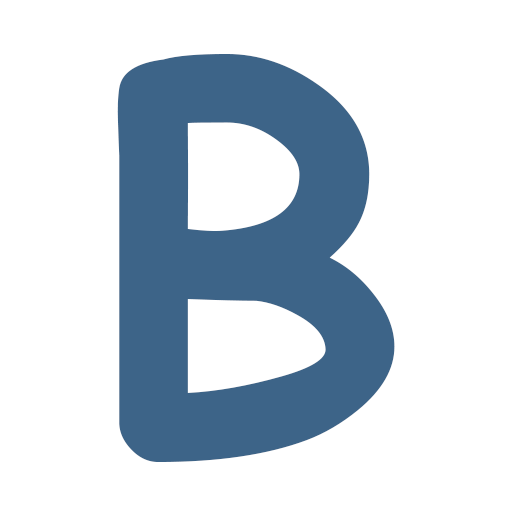
<style>
.page{position:relative;width:512px;height:512px;background:#ffffff}
.page>*{position:absolute;margin:0}
.t1{font:516.1px "ComicSansMS-Bold";color:#3d6488}
</style>
<div class="page">
<p class="t1" style="left:117px;top:54px;width:278px;height:408px">B</p>
</div>
